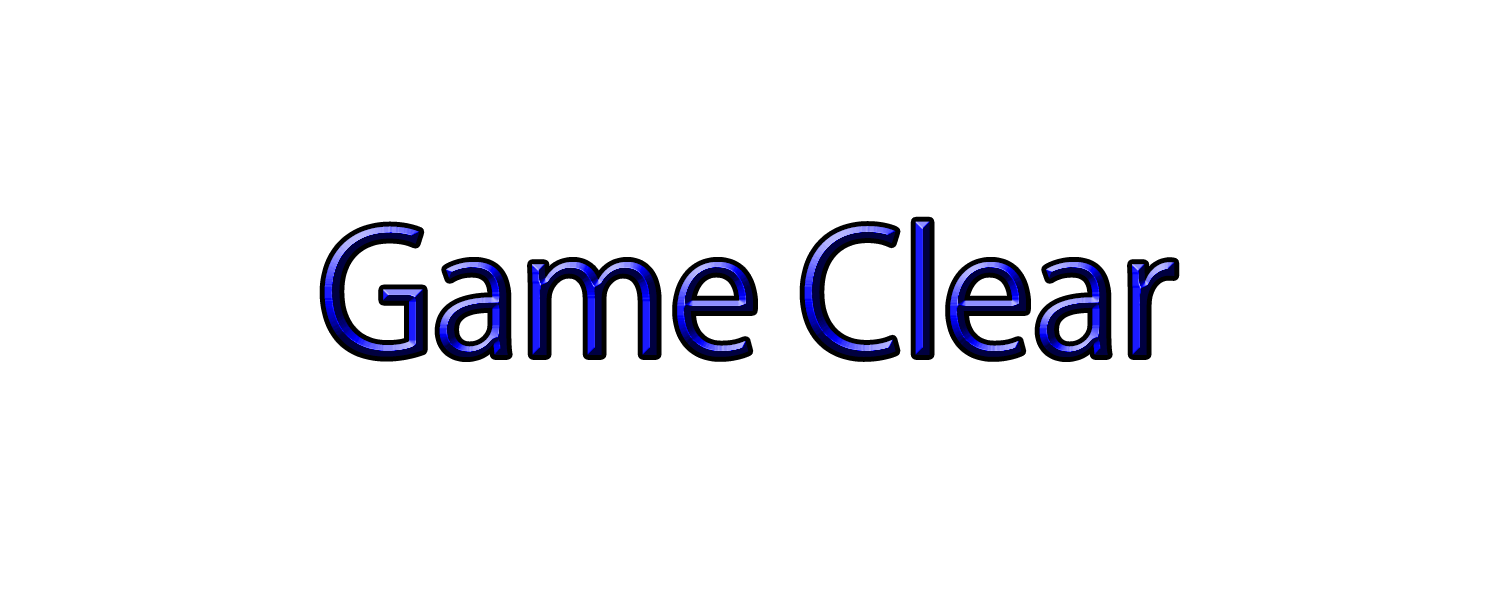
<style>
.page{position:relative;width:1500px;height:600px;background:#ffffff}
.page>*{position:absolute;margin:0}
.t1{font:166.7px "KozGoPr6N-Regular"}
</style>
<div class="page">
<p class="t1" style="left:324px;top:221px;width:851px;height:136px">Game Clear</p>
</div>
